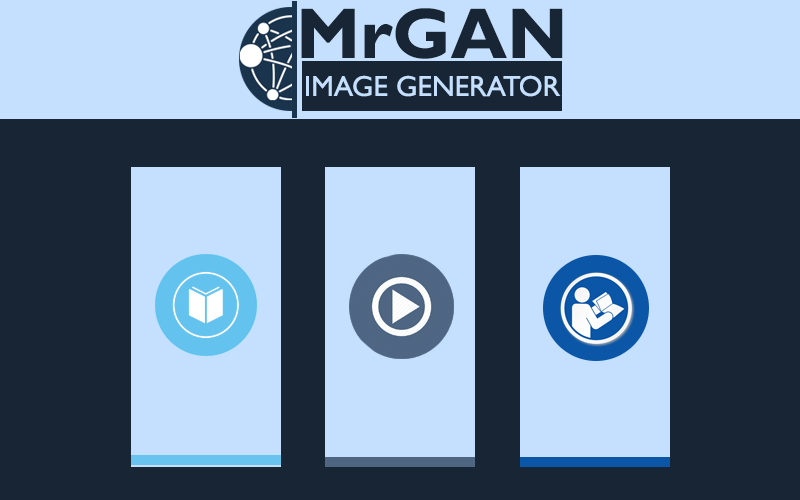
<style>
.page{position:relative;width:800px;height:500px;background:#172534}
.page>*{position:absolute;margin:0}
.t1{font:72px "GillSansMT-Bold";color:#172534}
.t2{font:29px "GillSansMT";color:#c4e0fe}
</style>
<div class="page">
<p class="t1" style="left:301px;top:8px;width:262px;height:51px">MrGAN</p>
<p class="t2" style="left:306px;top:75px;width:255px;height:22px">IMAGE GENERATOR</p>
</div>
